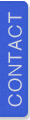
<style>
.page{position:relative;width:30px;height:120px}
.page>*{position:absolute;margin:0}
.t1{font:18px "Helvetica";letter-spacing:0.05em;color:#dadada}
</style>
<div class="page">
<p class="t1" style="left:8px;top:12px;width:14px;height:95px;rotate:-90deg;opacity:0.95">CONTACT</p>
</div>
